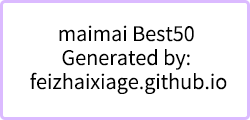
<style>
.page{position:relative;width:250px;height:120px;background:#ffffff}
.page>*{position:absolute;margin:0}
.t1{font:20px "SourceHanSansCN-Normal";color:#000000}
</style>
<div class="page">
<p class="t1" style="left:30px;top:25px;width:197px;height:69px;text-align:center">maimai Best50<br>Generated by:<br> feizhaixiage.github.io</p>
</div>
